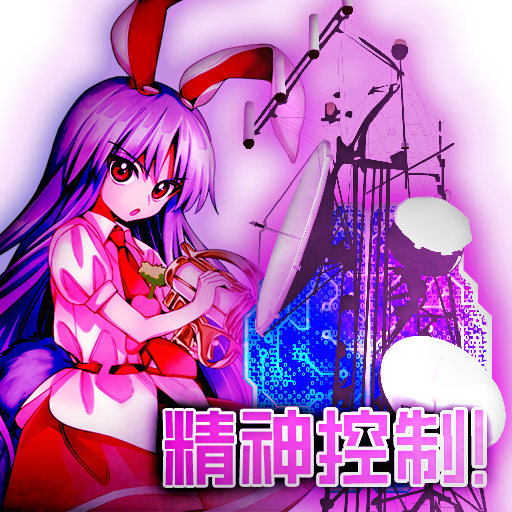
<style>
.page{position:relative;width:512px;height:512px}
.page>*{position:absolute;margin:0}
.t1{font:83.3px "ChuangkitKingKongRegular";scale:0.92 1}
</style>
<div class="page">
<p class="t1" style="left:165px;top:409px;width:319px;height:76px">精神控制!</p>
</div>
